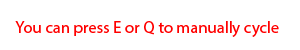
<style>
.page{position:relative;width:300px;height:50px;background:#ffffff}
.page>*{position:absolute;margin:0}
.t1{font:16.7px "MyriadPro-Regular";color:#ff0000}
</style>
<div class="page">
<p class="t1" style="left:15px;top:21px;width:264px;height:16px">You can press E or Q to manually cycle</p>
</div>
